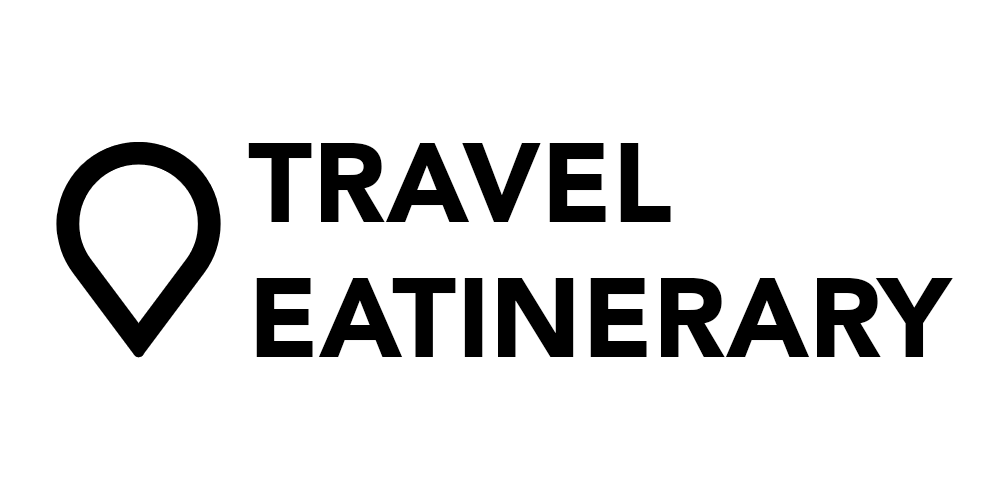
<style>
.page{position:relative;width:1000px;height:500px;background:#ffffff}
.page>*{position:absolute;margin:0}
.t1{font:112.5px "Avenir-Black";color:#000000}
</style>
<div class="page">
<p class="t1" style="left:248px;top:143px;width:705px;height:214px">TRAVEL<br>EATINERARY</p>
</div>
